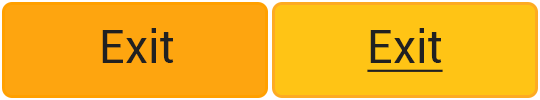
<style>
.page{position:relative;width:540px;height:100px;background:#fea50f}
.page>*{position:absolute;margin:0}
.t1{font:45.8px "Roboto-Regular";color:#212121}
.t2{font:45.8px "Roboto-Regular";color:#212121;text-decoration:underline}
</style>
<div class="page">
<p class="t1" style="left:102px;top:28px;width:72px;height:35px">Exit</p>
<p class="t2" style="left:367px;top:28px;width:76px;height:44px">Exit</p>
</div>
